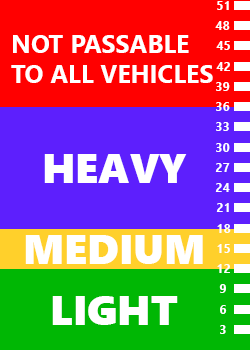
<style>
.page{position:relative;width:250px;height:350px;background:#5d1ffd}
.page>*{position:absolute;margin:0}
.t1{font:12.5px "SegoeUI-Bold";color:#ffffff}
.t2{font:25px "SegoeUI-Bold";color:#ffffff}
.t3{font:41.7px "SegoeUIBlack";color:#ffffff}
</style>
<div class="page">
<p class="t1" style="left:217px;top:1px;width:12px;height:9px">51</p>
<p class="t1" style="left:215px;top:21px;width:15px;height:9px">48</p>
<p class="t2" style="left:11px;top:35px;width:202px;height:48px">NOT PASSABLE<br>TO ALL VEHICLES</p>
<p class="t1" style="left:216px;top:41px;width:14px;height:9px">45</p>
<p class="t1" style="left:216px;top:62px;width:14px;height:9px">42</p>
<p class="t1" style="left:216px;top:82px;width:14px;height:9px">39</p>
<p class="t1" style="left:216px;top:102px;width:14px;height:9px">36</p>
<p class="t1" style="left:216px;top:122px;width:13px;height:9px">33</p>
<p class="t1" style="left:216px;top:143px;width:14px;height:9px">30</p>
<p class="t3" style="left:44px;top:154px;width:143px;height:29px">HEAVY</p>
<p class="t1" style="left:215px;top:163px;width:15px;height:9px">27</p>
<p class="t1" style="left:215px;top:183px;width:15px;height:9px">24</p>
<p class="t1" style="left:216px;top:203px;width:13px;height:9px">21</p>
<p class="t1" style="left:217px;top:224px;width:14px;height:9px">18</p>
<p class="t3" style="left:25px;top:235px;width:178px;height:29px">MEDIUM</p>
<p class="t1" style="left:217px;top:244px;width:13px;height:9px">15</p>
<p class="t1" style="left:217px;top:264px;width:13px;height:9px">12</p>
<p class="t1" style="left:219px;top:284px;width:7px;height:9px">9</p>
<p class="t3" style="left:52px;top:296px;width:126px;height:29px">LIGHT</p>
<p class="t1" style="left:220px;top:305px;width:7px;height:9px">6</p>
<p class="t1" style="left:220px;top:325px;width:6px;height:9px">3</p>
</div>
